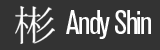
<style>
.page{position:relative;width:160px;height:50px;background:#333333}
.page>*{position:absolute;margin:0}
.t1{font:33.3px "AkzidenzGroteskBQ-Cnd";letter-spacing:-0.05em;color:#ffffff}
</style>
<div class="page">
<p class="t1" style="left:66px;top:10px;width:85px;height:29px">Andy Shin</p>
</div>
